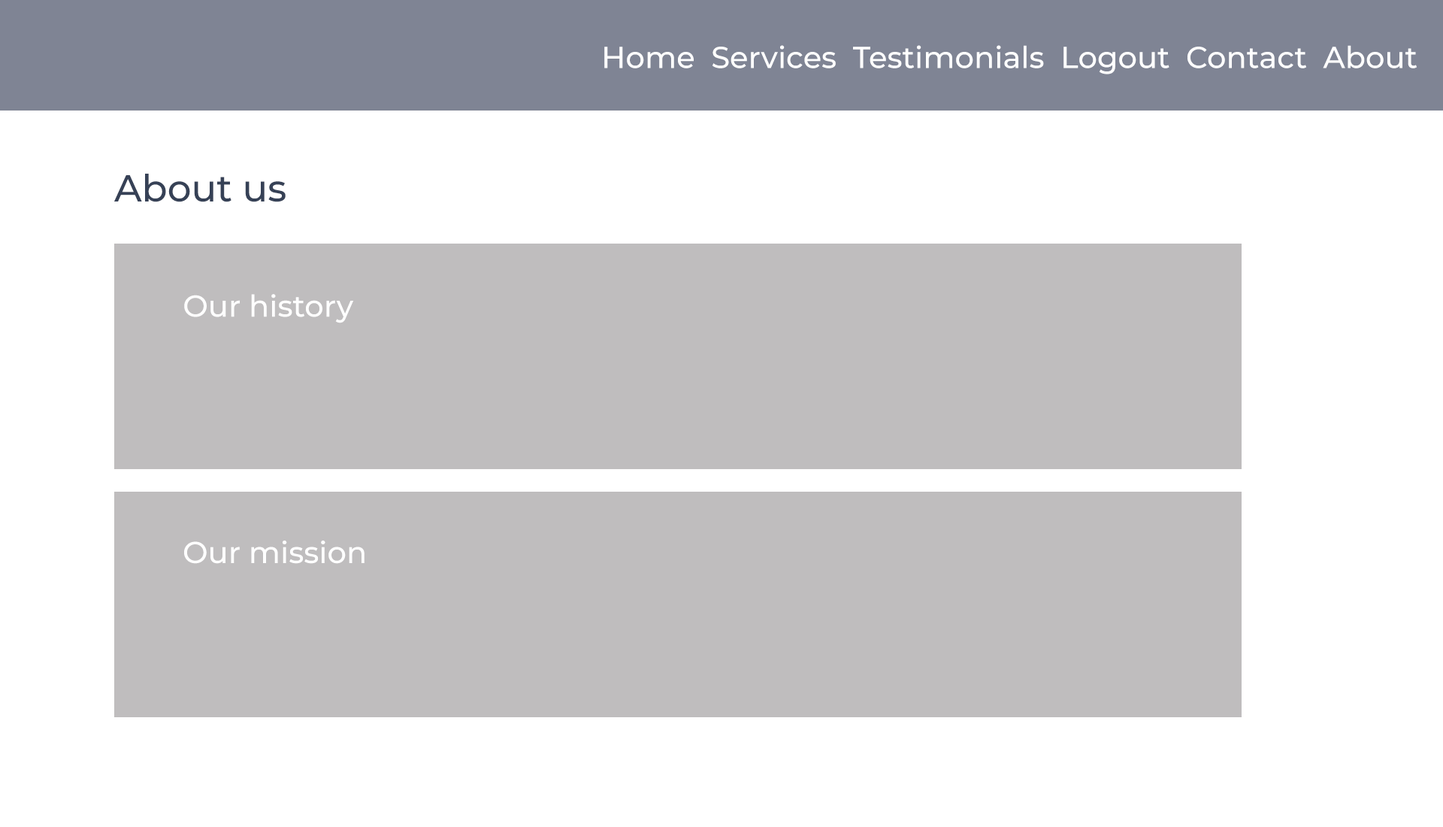
<style>
.page{position:relative;width:1443px;height:827px;background:#ffffff}
.page>*{position:absolute;margin:0}
.t1{font:30.1px "Montserrat-Medium";color:#ffffff}
.t2{font:37.6px "Montserrat-Medium";color:#364156}
</style>
<div class="page">
<p class="t1" style="left:604px;top:45px;width:812px;height:29px">Home  Services  Testimonials  Logout  Contact  About</p>
<p class="t2" style="left:114px;top:174px;width:172px;height:28px">About us</p>
<p class="t1" style="left:184px;top:294px;width:170px;height:29px">Our history</p>
<p class="t1" style="left:184px;top:540px;width:180px;height:24px">Our mission</p>
</div>
